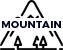
<style>
.page{position:relative;width:63px;height:50px;background:#ffffff}
.page>*{position:absolute;margin:0}
.t1{font:10px "Montserrat-Bold";letter-spacing:0.05em;color:#000222}
</style>
<div class="page">
<p class="t1" style="left:2px;top:21px;width:59px;height:7px">MOUNTAIN</p>
</div>
